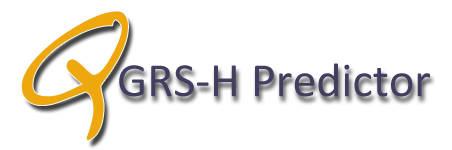
<style>
.page{position:relative;width:452px;height:150px;background:#ffffff}
.page>*{position:absolute;margin:0}
.t1{font:48px "Calibri";color:#413e60}
</style>
<div class="page">
<p class="t1" style="left:119px;top:63px;width:311px;height:34px">GRS-H Predictor</p>
</div>
